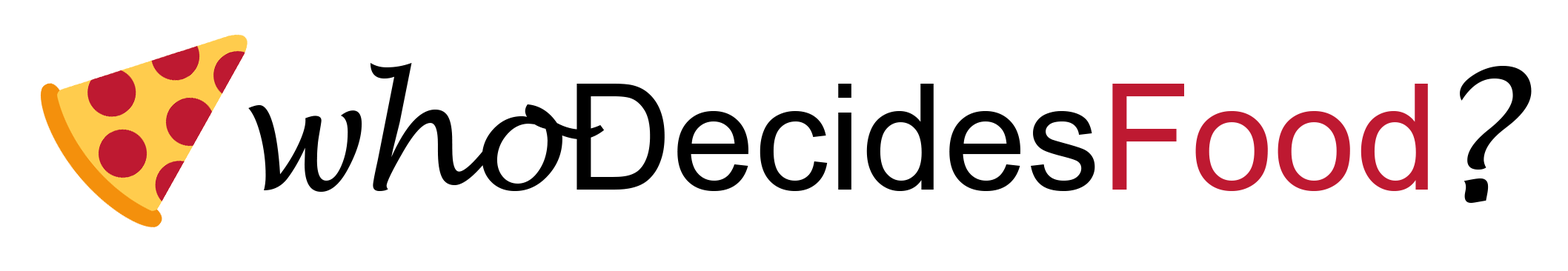
<style>
.page{position:relative;width:1568px;height:271px;background:#ffffff}
.page>*{position:absolute;margin:0}
.t1{font:148.2px "ArialMT";color:#000000}
.t2{font:148.2px "LucidaHandwriting-Italic";color:#000000}
.t3{font:148.2px "ArialMT";color:#be1931}
.t4{font:185.3px "LucidaHandwriting-Italic";color:#000000}
</style>
<div class="page">
<p class="t1" style="left:248px;top:63px;width:1180px;height:129px"><span class="t2">who</span>Decides<span class="t3">Food</span></p>
<p class="t4" style="left:1460px;top:66px;width:72px;height:137px">?</p>
</div>
